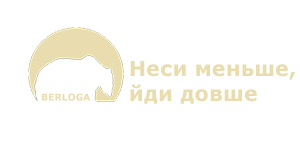
<style>
.page{position:relative;width:300px;height:150px;background:#ffffff}
.page>*{position:absolute;margin:0}
.t1{font:20.8px "Verdana-Bold";color:#e9ddaf}
</style>
<div class="page">
<p class="t1" style="left:130px;top:61px;width:166px;height:43px">Неси меньше,<br>йди довше</p>
</div>
